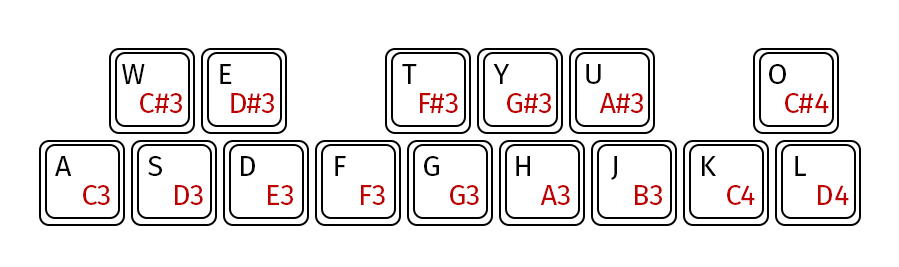
<style>
.page{position:relative;width:899px;height:267px;background:#ffffff}
.page>*{position:absolute;margin:0}
.t1{font:28.9px "FiraSans-Regular";color:#000000;text-transform:uppercase}
.t2{font:28.9px "FiraSans-Regular";color:#be0000}
.t3{font:28.9px "FiraSans-Regular";color:#be0000;text-transform:uppercase}
</style>
<div class="page">
<p class="t1" style="left:122px;top:64px;width:23px;height:20px">W</p>
<p class="t1" style="left:220px;top:64px;width:12px;height:20px">E</p>
<p class="t1" style="left:402px;top:64px;width:15px;height:20px">T</p>
<p class="t1" style="left:493px;top:64px;width:17px;height:20px">Y</p>
<p class="t1" style="left:586px;top:64px;width:15px;height:20px">U</p>
<p class="t1" style="left:769px;top:64px;width:17px;height:20px">O</p>
<p class="t2" style="left:140px;top:93px;width:42px;height:20px">C#3</p>
<p class="t3" style="left:231px;top:93px;width:43px;height:20px">d#3</p>
<p class="t3" style="left:420px;top:93px;width:38px;height:20px">f#3</p>
<p class="t3" style="left:507px;top:93px;width:44px;height:20px">g#3</p>
<p class="t3" style="left:599px;top:93px;width:44px;height:20px">a#3</p>
<p class="t3" style="left:785px;top:93px;width:44px;height:20px">C#4</p>
<p class="t1" style="left:55px;top:156px;width:17px;height:20px">A</p>
<p class="t1" style="left:148px;top:156px;width:14px;height:20px">s</p>
<p class="t1" style="left:241px;top:156px;width:14px;height:20px">D</p>
<p class="t1" style="left:335px;top:156px;width:11px;height:20px">F</p>
<p class="t1" style="left:424px;top:156px;width:15px;height:20px">G</p>
<p class="t1" style="left:516px;top:156px;width:14px;height:20px">H</p>
<p class="t1" style="left:611px;top:156px;width:6px;height:24px">J</p>
<p class="t1" style="left:702px;top:156px;width:14px;height:20px">K</p>
<p class="t1" style="left:795px;top:156px;width:12px;height:20px">L</p>
<p class="t3" style="left:83px;top:185px;width:27px;height:20px">C3</p>
<p class="t3" style="left:175px;top:185px;width:28px;height:20px">D3</p>
<p class="t3" style="left:268px;top:185px;width:25px;height:20px">E3</p>
<p class="t3" style="left:361px;top:185px;width:24px;height:20px">F3</p>
<p class="t3" style="left:450px;top:185px;width:29px;height:20px">G3</p>
<p class="t3" style="left:540px;top:185px;width:30px;height:20px">A3</p>
<p class="t3" style="left:635px;top:185px;width:27px;height:20px">B3</p>
<p class="t3" style="left:727px;top:185px;width:28px;height:20px">C4</p>
<p class="t3" style="left:818px;top:185px;width:31px;height:20px">D4</p>
</div>
